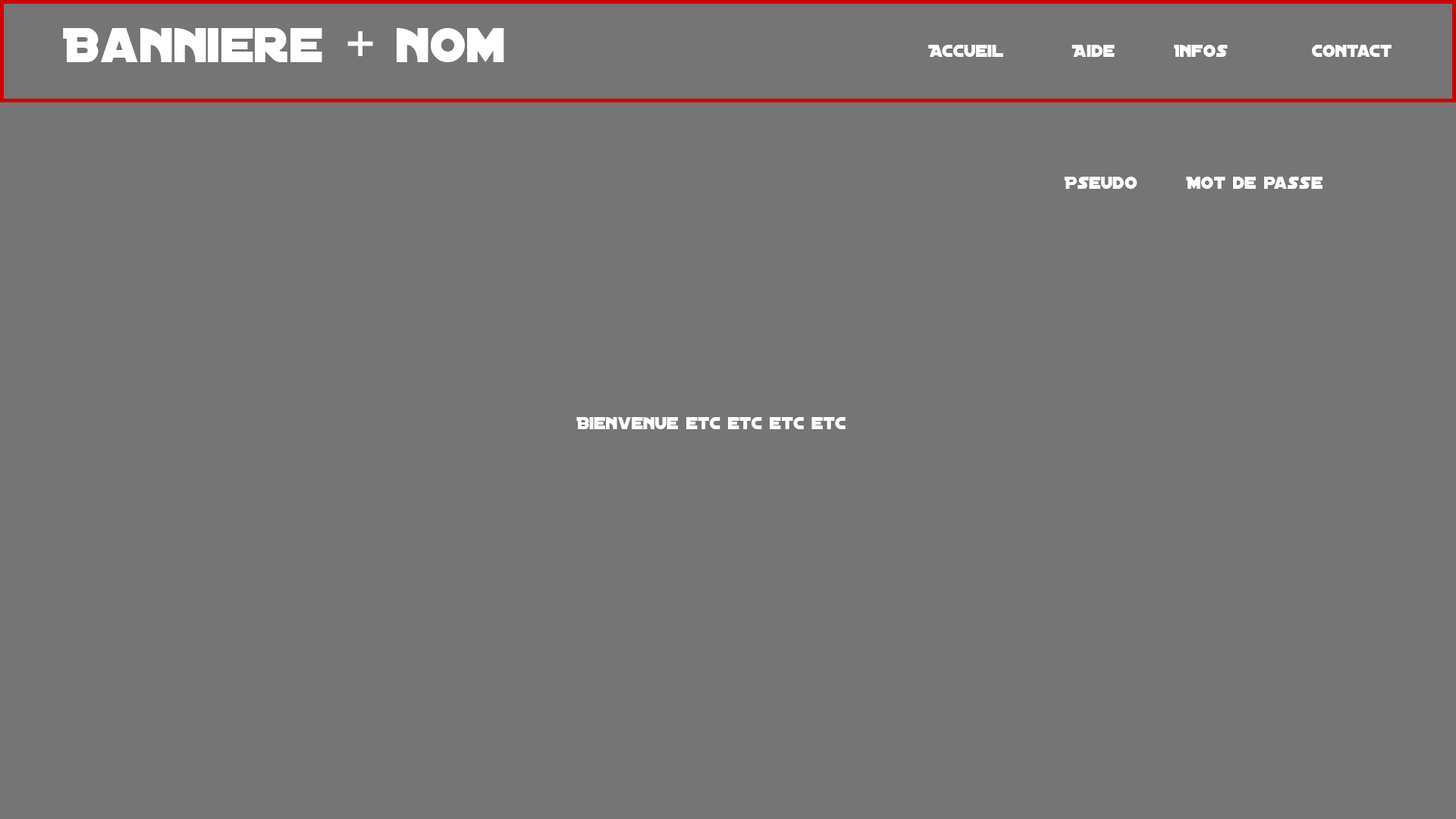
<style>
.page{position:relative;width:1456px;height:819px;background:#757575}
.page>*{position:absolute;margin:0}
.t1{font:52.3px "DistantGalaxy";color:#ffffff}
.t2{font:18.2px "DistantGalaxy";color:#ffffff}
</style>
<div class="page">
<p class="t1" style="left:63px;top:28px;width:441px;height:34px">Banniere + nom</p>
<p class="t2" style="left:928px;top:45px;width:464px;height:12px">Accueil    Aide   Infos    Contact</p>
<p class="t2" style="left:1064px;top:177px;width:73px;height:12px">Pseudo</p>
<p class="t2" style="left:1186px;top:177px;width:137px;height:12px">Mot de passe</p>
<p class="t2" style="left:576px;top:417px;width:270px;height:12px">Bienvenue etc etc etc etc</p>
</div>
